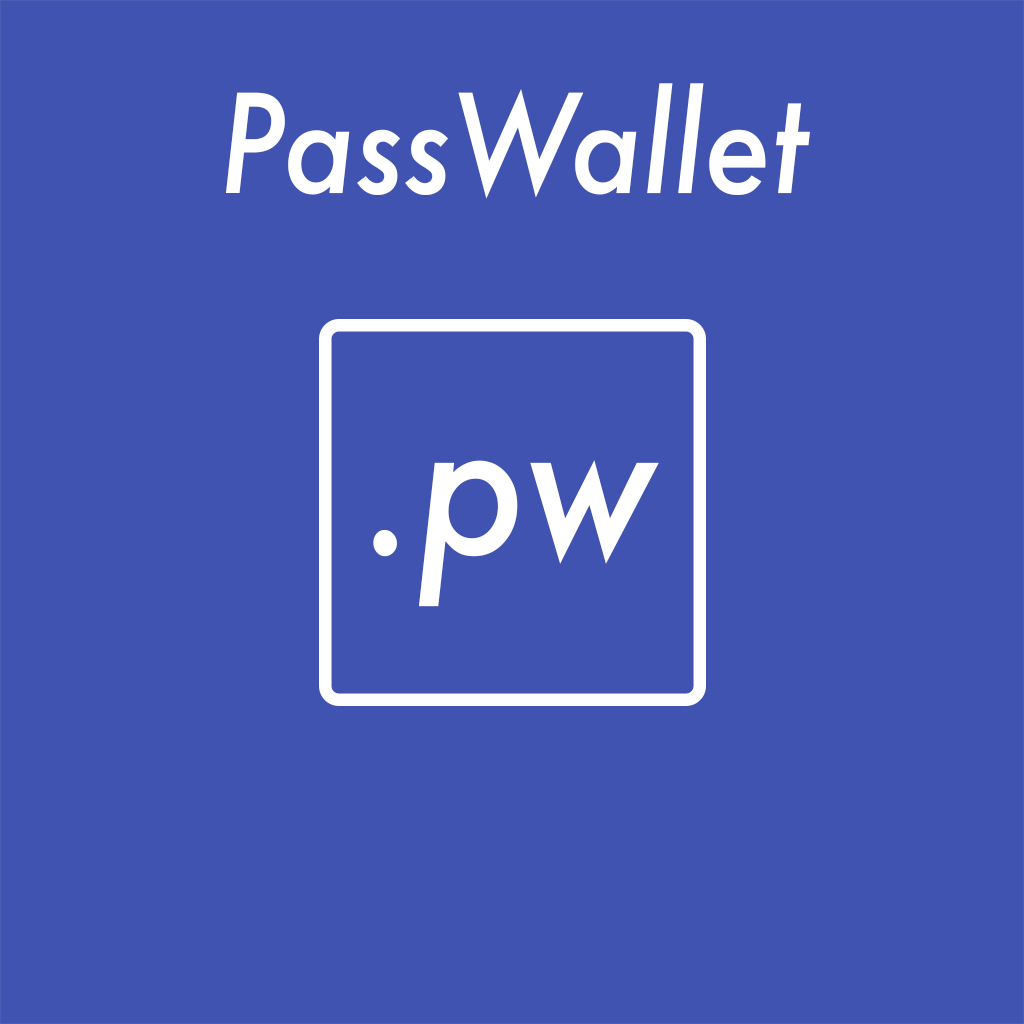
<style>
.page{position:relative;width:1024px;height:1024px;background:#4153b0}
.page>*{position:absolute;margin:0}
.t1{font:133.4px "Futura-MediumItalic";color:#ffffff;scale:0.9 1}
.t2{font:197.7px "Futura-MediumItalic";color:#ffffff;scale:0.9 1}
</style>
<div class="page">
<p class="t1" style="left:226px;top:83px;width:584px;height:116px">PassWallet</p>
<p class="t2" style="left:373px;top:460px;width:286px;height:147px">.pw</p>
</div>
